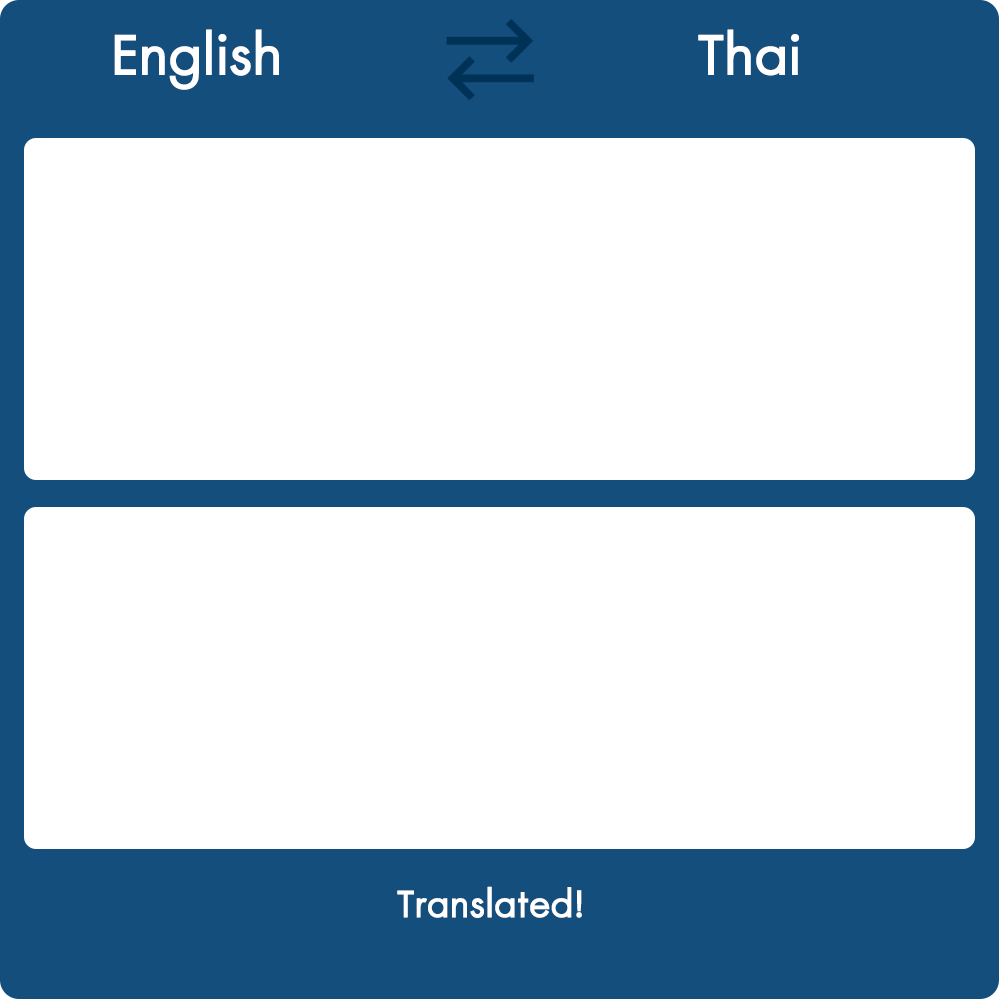
<style>
.page{position:relative;width:1000px;height:1000px;background:#ffffff}
.page>*{position:absolute;margin:0}
.t1{font:75px "DBAdmanX";color:#ffffff;font-weight:bold}
.t2{font:50px "DBAdmanX";color:#ffffff;font-weight:bold}
</style>
<div class="page">
<p class="t1" style="left:114px;top:29px;width:165px;height:61px">English</p>
<p class="t1" style="left:698px;top:29px;width:101px;height:47px">Thai</p>
<p class="t2" style="left:397px;top:886px;width:185px;height:32px">Translated!</p>
</div>
